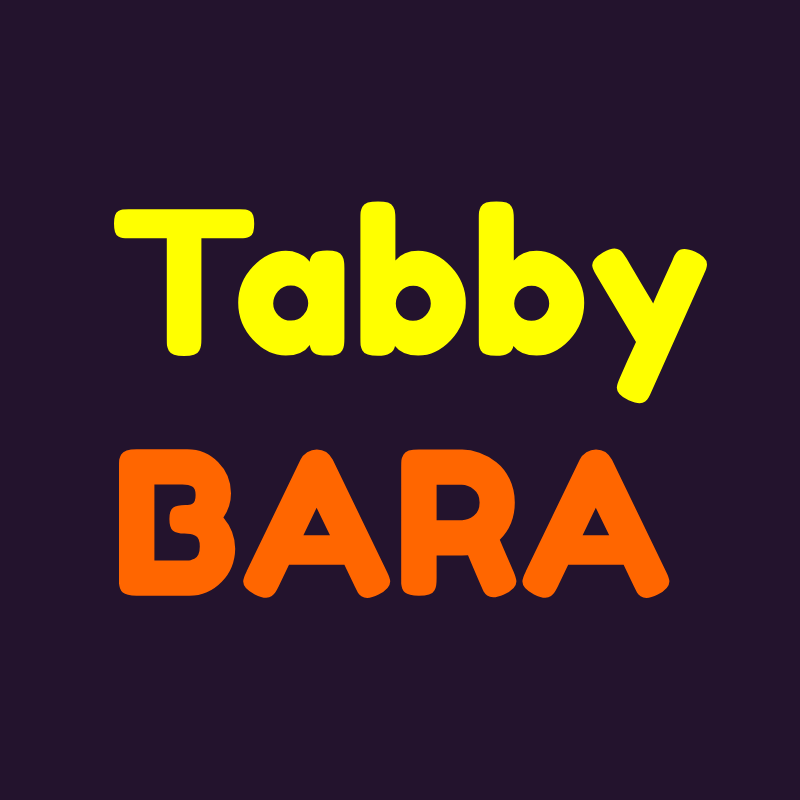
<style>
.page{position:relative;width:800px;height:800px;background:#23132d}
.page>*{position:absolute;margin:0}
.t1{font:200px "FredokaOne-Regular";color:#ffff00}
.t2{font:200px "FredokaOne-Regular";color:#ff6600}
</style>
<div class="page">
<p class="t1" style="left:114px;top:201px;width:593px;height:397px">Tabby<br><span class="t2">BARA</span></p>
</div>
